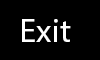
<style>
.page{position:relative;width:100px;height:60px;background:#000000}
.page>*{position:absolute;margin:0}
.t1{font:33.3px "MyriadPro-Regular";color:#ffffff}
</style>
<div class="page">
<p class="t1" style="left:22px;top:19px;width:49px;height:23px">Exit</p>
</div>
